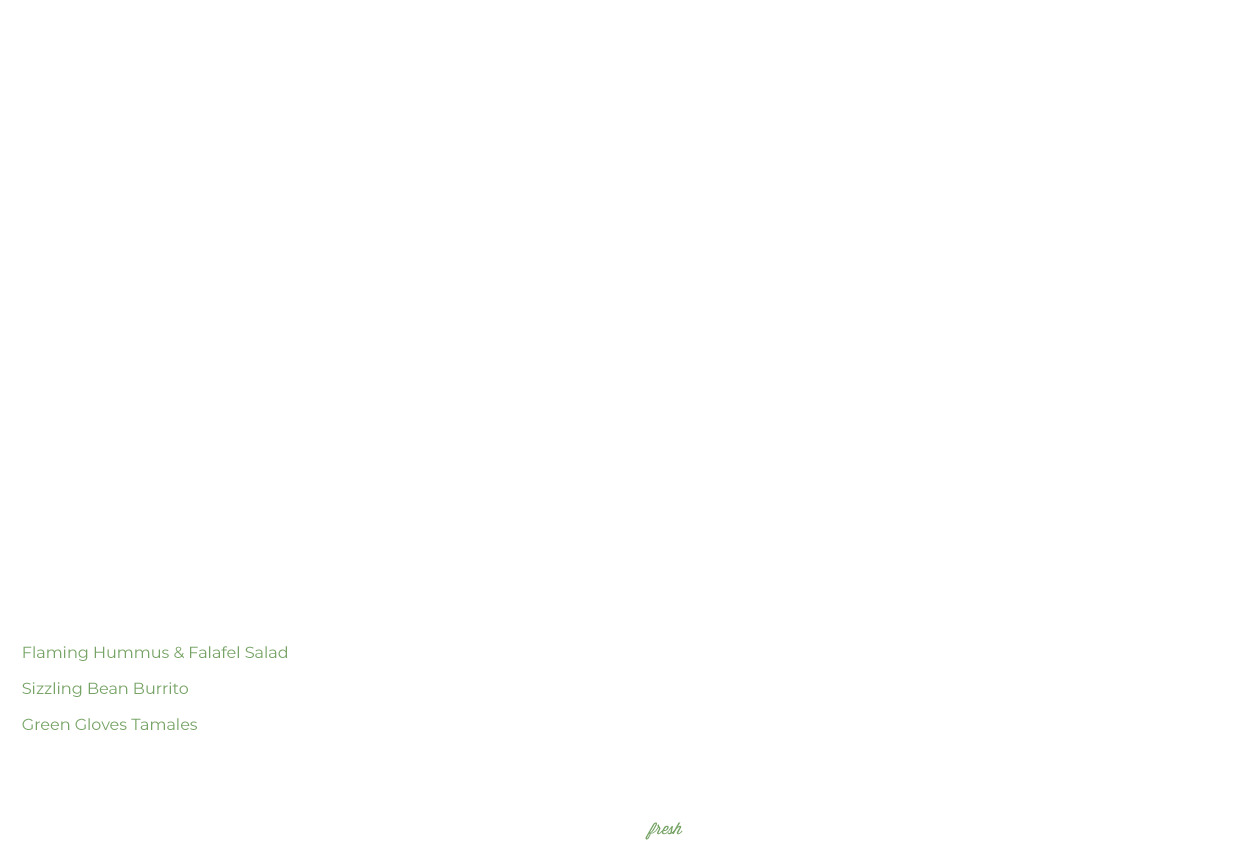
<style>
.page{position:relative;width:1240px;height:868px;background:#ffffff}
.page>*{position:absolute;margin:0}
.t1{font:16px/18px "Montserrat-Regular";color:#77a466}
.t2{font:16px "Wisdom-Script";color:#77a466}
</style>
<div class="page">
<p class="t1" style="left:22px;top:646px;width:265px;height:84px">Flaming Hummus &amp; Falafel Salad<br><br>    Sizzling Bean Burrito<br><br>    Green Gloves Tamales</p>
<p class="t2" style="left:645px;top:822px;width:38px;height:18px">fresh</p>
</div>
